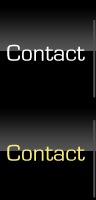
<style>
.page{position:relative;width:96px;height:200px;background:#000000}
.page>*{position:absolute;margin:0}
.t1{font:24px "EurostileRegular";color:#ffffff}
.t2{font:24px "EurostileRegular";color:#f8eb7a}
</style>
<div class="page">
<p class="t1" style="left:7px;top:44px;width:78px;height:17px">Contact</p>
<p class="t2" style="left:7px;top:144px;width:78px;height:17px">Contact</p>
</div>
